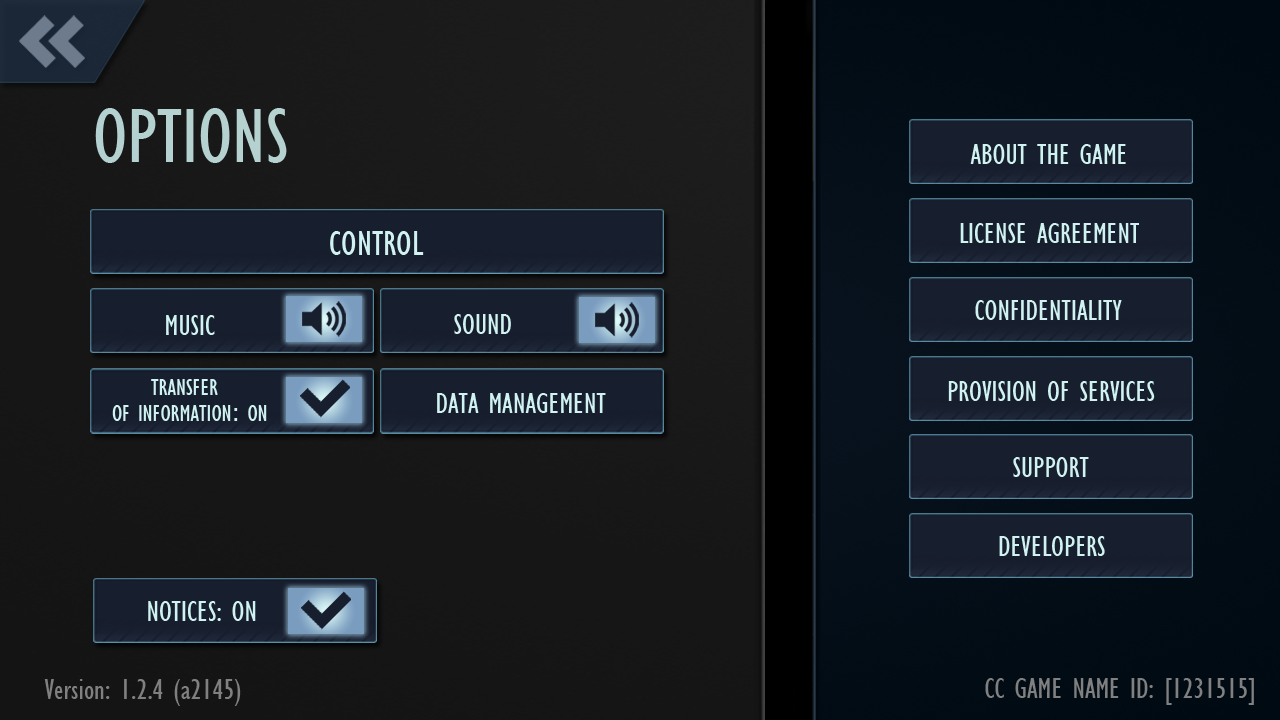
<style>
.page{position:relative;width:1280px;height:720px}
.page>*{position:absolute;margin:0}
.t1{font:80px "GillSansMT-Condensed";color:#b5d2d1}
.t2{font:30px "GillSansMT-Condensed";color:#d0f2f1}
.t3{font:36px "GillSansMT-Condensed";color:#d0f2f1}
.t4{font:24px "GillSansMT-Condensed";color:#d0f2f1}
.t5{font:24px "Tahoma";color:#d0f2f1}
.t6{font:30px "GillSansMT-Condensed";color:#808080}
</style>
<div class="page">
<p class="t1" style="left:95px;top:108px;width:192px;height:55px">OPTIONS</p>
<p class="t2" style="left:970px;top:144px;width:156px;height:20px">ABOUT THE GAME</p>
<p class="t3" style="left:330px;top:231px;width:94px;height:24px">CONTROL</p>
<p class="t2" style="left:960px;top:223px;width:179px;height:20px">LICENSE AGREEMENT</p>
<p class="t2" style="left:975px;top:300px;width:147px;height:20px">CONFIDENTIALITY</p>
<p class="t2" style="left:166px;top:315px;width:49px;height:20px">MUSIC</p>
<p class="t2" style="left:454px;top:314px;width:57px;height:20px">SOUND</p>
<p class="t4" style="left:151px;top:379px;width:67px;height:16px">TRANSFER</p>
<p class="t2" style="left:948px;top:381px;width:207px;height:20px">PROVISION OF SERVICES</p>
<p class="t2" style="left:437px;top:393px;width:169px;height:20px">DATA MANAGEMENT</p>
<p class="t4" style="left:112px;top:405px;width:155px;height:16px">OF INFORMATION<span class="t5">: </span>ON</p>
<p class="t2" style="left:1013px;top:457px;width:76px;height:20px">SUPPORT</p>
<p class="t2" style="left:999px;top:536px;width:106px;height:20px">DEVELOPERS</p>
<p class="t2" style="left:148px;top:601px;width:108px;height:20px">NOTICES: ON</p>
<p class="t6" style="left:985px;top:678px;width:269px;height:27px">CC GAME NAME ID: [1231515]</p>
<p class="t6" style="left:44px;top:679px;width:197px;height:27px">Version: 1.2.4 (a2145)</p>
</div>
